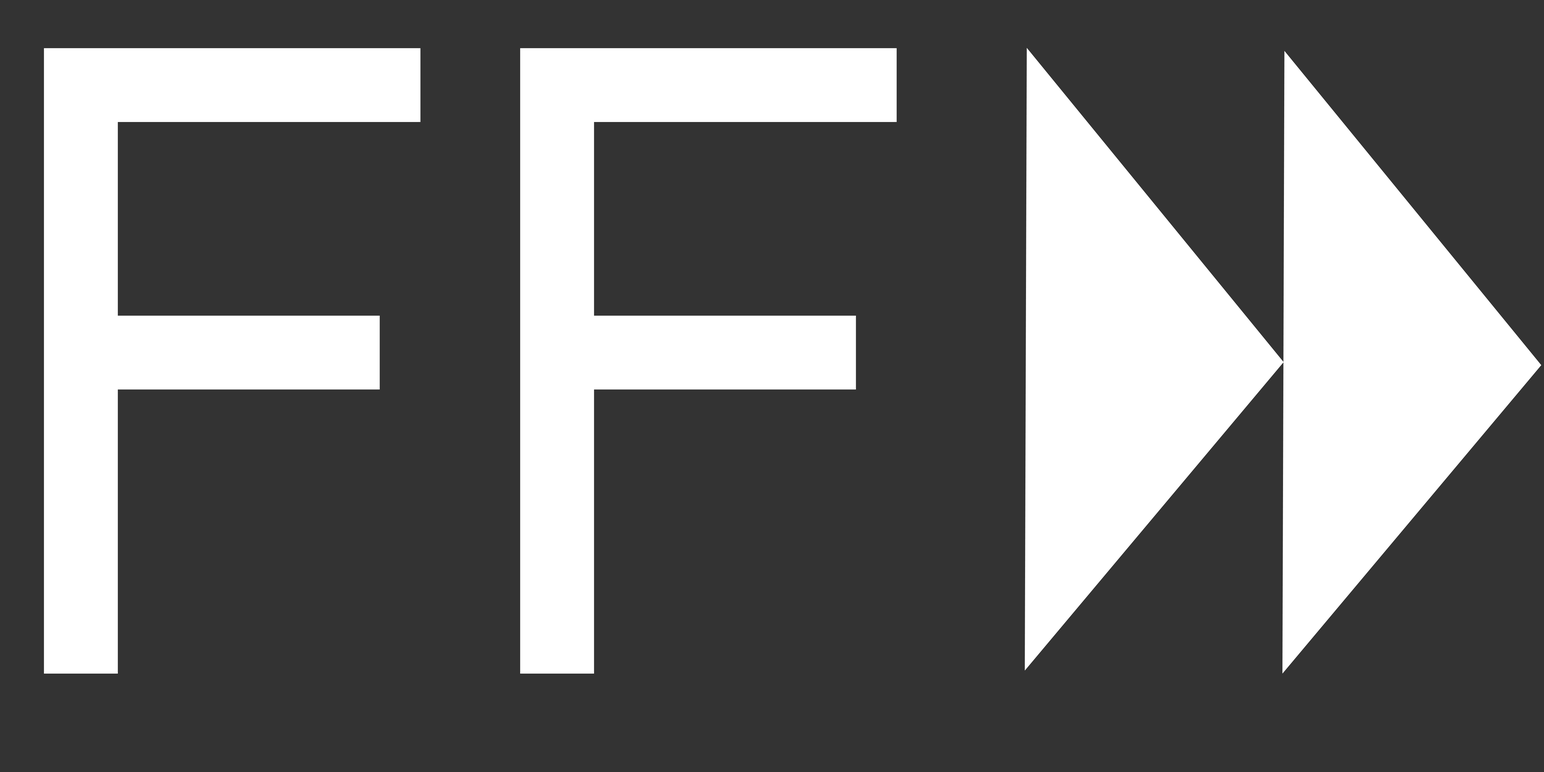
<style>
.page{position:relative;width:1544px;height:772px;background:#333333}
.page>*{position:absolute;margin:0}
.t1{font:874px "ArialMT";color:#ffffff;scale:0.89 1}
</style>
<div class="page">
<p class="t1" style="left:44px;top:48px;width:853px;height:626px">FF</p>
</div>
